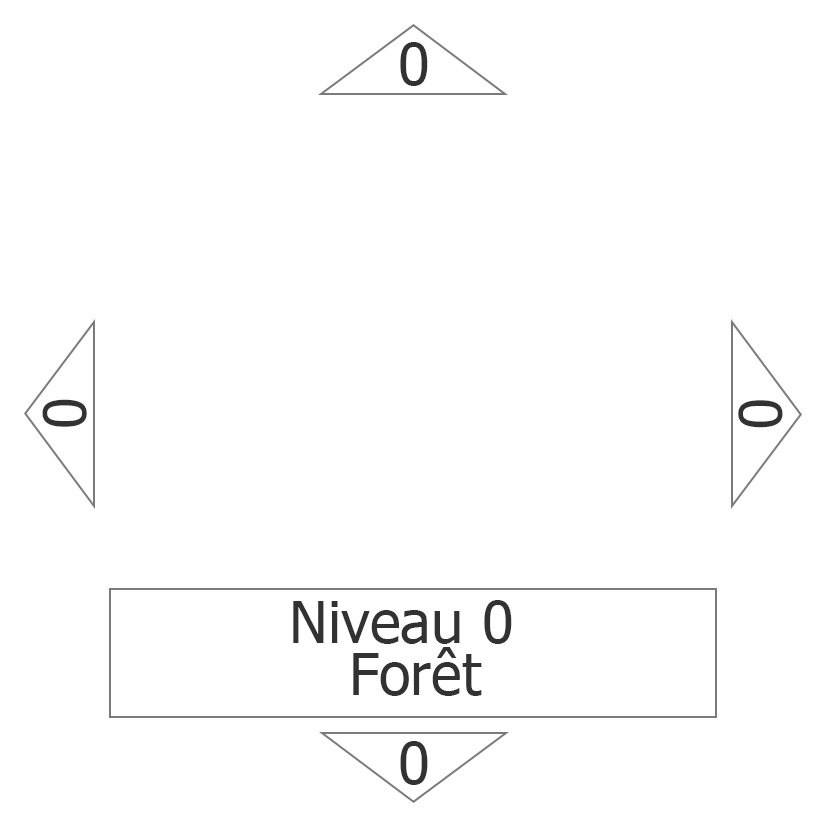
<style>
.page{position:relative;width:827px;height:827px;background:#ffffff}
.page>*{position:absolute;margin:0}
.t1{font:58.3px "Tahoma";color:#323232}
</style>
<div class="page">
<p class="t1" style="left:400px;top:42px;width:28px;height:44px">0</p>
<p class="t1" style="left:42px;top:399px;width:45px;height:28px;rotate:-90deg">0</p>
<p class="t1" style="left:738px;top:400px;width:45px;height:28px;rotate:90deg">0</p>
<p class="t1" style="left:293px;top:601px;width:167px;height:43px">Niveau</p>
<p class="t1" style="left:484px;top:600px;width:28px;height:44px">0</p>
<p class="t1" style="left:353px;top:647px;width:129px;height:49px">Forêt</p>
<p class="t1" style="left:400px;top:741px;width:28px;height:44px;rotate:180deg">0</p>
</div>
